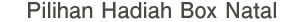
<style>
.page{position:relative;width:303px;height:22px;background:#ffffff}
.page>*{position:absolute;margin:0}
.t1{font:22px "FutoGoB101Pr5-Bold";color:#4c4843}
</style>
<div class="page">
<p class="t1" style="left:28px;top:2px;width:248px;height:17px">Pilihan Hadiah Box Natal</p>
</div>
